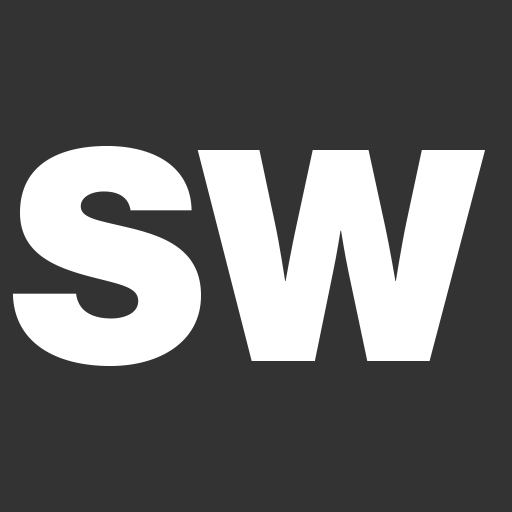
<style>
.page{position:relative;width:512px;height:512px;background:#333333}
.page>*{position:absolute;margin:0}
.t1{font:295px "NHaasGroteskDSPro-95Blk";color:#ffffff}
</style>
<div class="page">
<p class="t1" style="left:12px;top:146px;width:473px;height:220px">SW</p>
</div>
